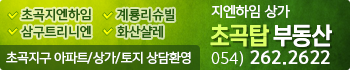
<style>
.page{position:relative;width:350px;height:70px}
.page>*{position:absolute;margin:0}
.t1{font:13px "YoonGothicPro760";color:#ffffff}
.t2{font:12px/17px "YoonGothicPro770";color:#285b0e}
.t3{font:24px "YoonMeolijeongche2M";color:#ddff66}
.t4{font:24px "YoonMeolijeongche2M";color:#ffffff}
.t5{font:12px "YoonGothicPro760";letter-spacing:-0.025em;color:#ffffff}
.t6{font:16px "YoonGothicPro780";letter-spacing:0.025em;color:#ffffff}
.t7{font:16px "YoonGothicPro730";letter-spacing:0.025em;color:#ffffff}
</style>
<div class="page">
<p class="t1" style="left:211px;top:5px;width:79px;height:13px">지엔하임 상가</p>
<p class="t2" style="left:21px;top:8px;width:154px;height:30px">초곡지엔하임       계룡리슈빌<br>삼구트리니엔       화산샬레</p>
<p class="t3" style="left:210px;top:24px;width:122px;height:23px">초곡탑 <span class="t4">부동산</span></p>
<p class="t5" style="left:6px;top:51px;width:185px;height:13px">초곡지구 아파트/상가/토지 상담환영</p>
<p class="t6" style="left:211px;top:50px;width:119px;height:17px"><span class="t7">054) </span>262.2622</p>
</div>
